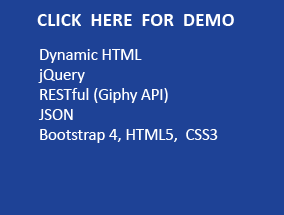
<style>
.page{position:relative;width:284px;height:215px;background:#1e4296}
.page>*{position:absolute;margin:0}
.t1{font:19.4px "Calibri-Bold";color:#ffffff}
.t2{font:16.7px "Calibri";color:#ffffff}
</style>
<div class="page">
<p class="t1" style="left:37px;top:14px;width:197px;height:12px">CLICK  HERE  FOR  DEMO</p>
<p class="t2" style="left:38px;top:49px;width:180px;height:94px">Dynamic HTML<br>jQuery<br>RESTful (Giphy API)<br>JSON<br>Bootstrap 4, HTML5,  CSS3</p>
</div>
